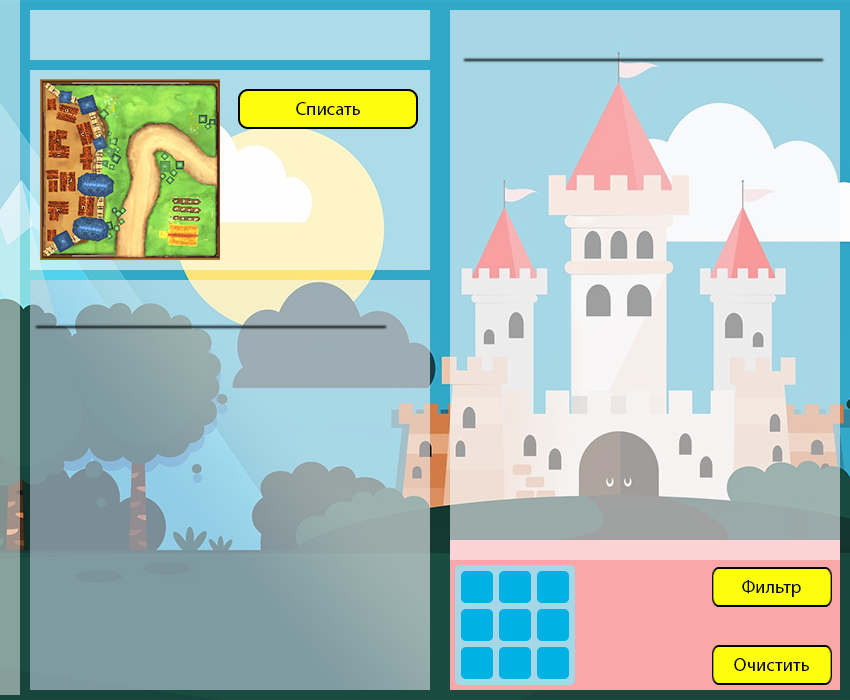
<style>
.page{position:relative;width:850px;height:700px}
.page>*{position:absolute;margin:0}
.t1{font:18.7px "MyriadPro-Regular";color:#000000}
</style>
<div class="page">
<p class="t1" style="left:296px;top:102px;width:64px;height:13px">Списать</p>
<p class="t1" style="left:742px;top:580px;width:59px;height:17px">Фильтр</p>
<p class="t1" style="left:734px;top:658px;width:75px;height:13px">Очистить</p>
</div>
